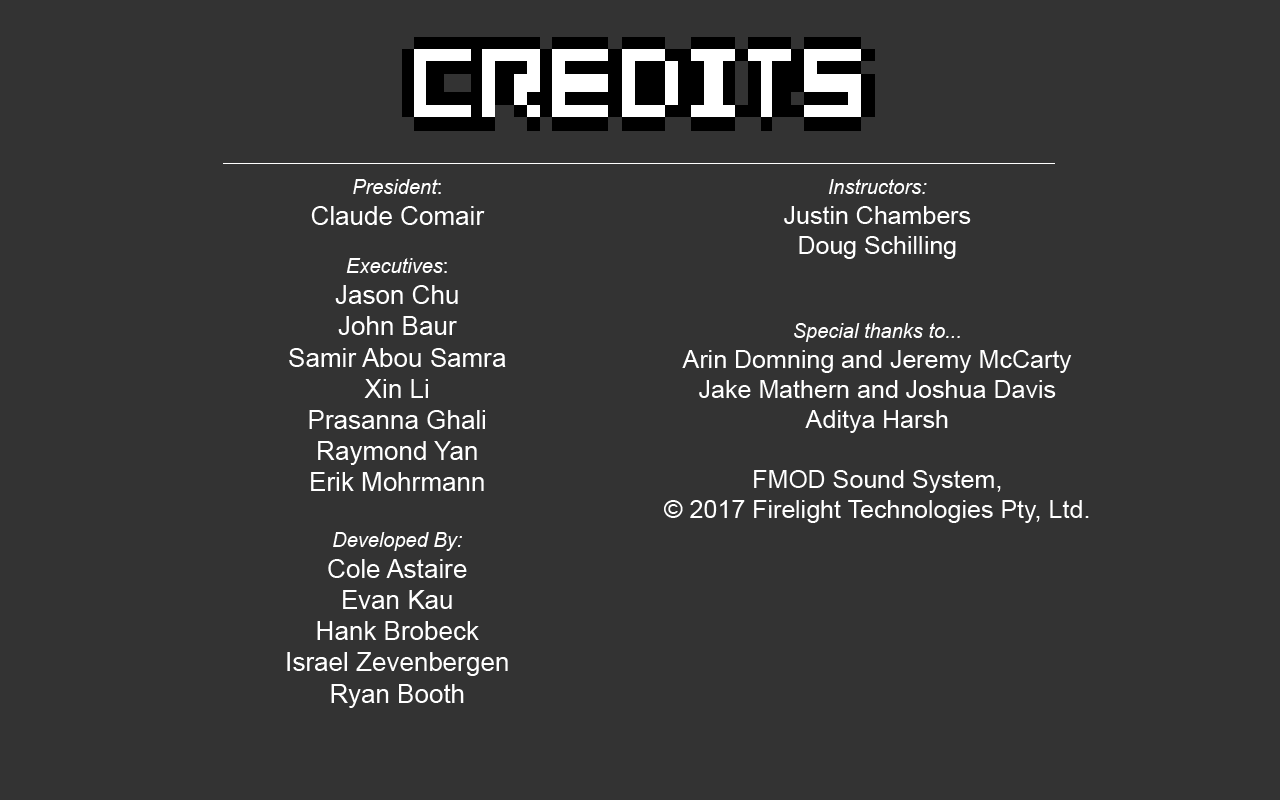
<style>
.page{position:relative;width:1280px;height:800px;background:#333333}
.page>*{position:absolute;margin:0}
.t1{font:26px "ArialMT";color:#ffffff}
.t2{font:20px "Arial-ItalicMT";color:#ffffff}
.t3{font:20px "ArialMT";color:#ffffff}
.t4{font:25px "ArialMT";color:#ffffff}
</style>
<div class="page">
<p class="t1" style="left:287px;top:179px;width:221px;height:529px;text-align:center"><span class="t2">President</span><span class="t3">:<br></span>Claude Comair<br><br><span class="t2">Executives</span><span class="t3">:<br></span>Jason Chu<br>John Baur<br>Samir Abou Samra<br>Xin Li<br>Prasanna Ghali<br>Raymond Yan<br>Erik Mohrmann<br><br><span class="t2">Developed By:<br></span>Cole Astaire<br>Evan Kau<br>Hank Brobeck<br>Israel Zevenbergen<br>Ryan Booth</p>
<p class="t4" style="left:664px;top:179px;width:425px;height:344px;text-align:center"><span class="t2">Instructors:<br></span>Justin Chambers<br>Doug Schilling<br><br><br><span class="t2">Special thanks to...<br></span>Arin Domning and Jeremy McCarty<br>Jake Mathern and Joshua Davis<br>Aditya Harsh<br><br>FMOD Sound System,<br>© 2017 Firelight Technologies Pty, Ltd.</p>
</div>
